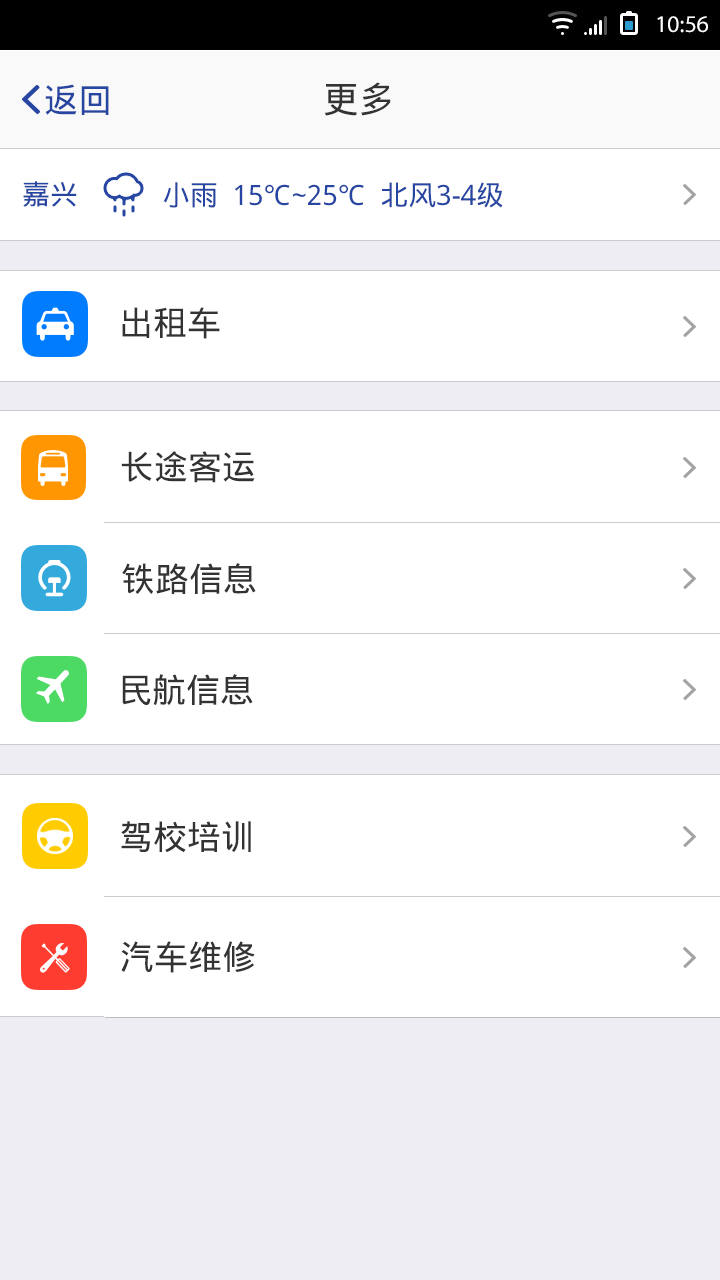
<style>
.page{position:relative;width:720px;height:1280px;background:#ffffff}
.page>*{position:absolute;margin:0}
.t1{font:34px "DroidSansFallback";color:#2746a2}
.t2{font:36px "DroidSansFallback";color:#333333}
.t3{font:28px "DroidSansFallback";color:#2746a2}
.t4{font:34px "DroidSansFallback";color:#333333}
</style>
<div class="page">
<p class="t1" style="left:45px;top:84px;width:64px;height:31px">返回</p>
<p class="t2" style="left:324px;top:82px;width:67px;height:34px">更多</p>
<p class="t3" style="left:23px;top:181px;width:54px;height:26px">嘉兴</p>
<p class="t3" style="left:163px;top:182px;width:340px;height:26px">小雨  15℃~25℃  北风3-4级</p>
<p class="t4" style="left:122px;top:307px;width:98px;height:32px">出租车</p>
<p class="t4" style="left:121px;top:451px;width:134px;height:32px">长途客运</p>
<p class="t4" style="left:122px;top:563px;width:134px;height:31px">铁路信息</p>
<p class="t4" style="left:122px;top:674px;width:131px;height:31px">民航信息</p>
<p class="t4" style="left:121px;top:821px;width:130px;height:32px">驾校培训</p>
<p class="t4" style="left:121px;top:941px;width:134px;height:32px">汽车维修</p>
</div>
